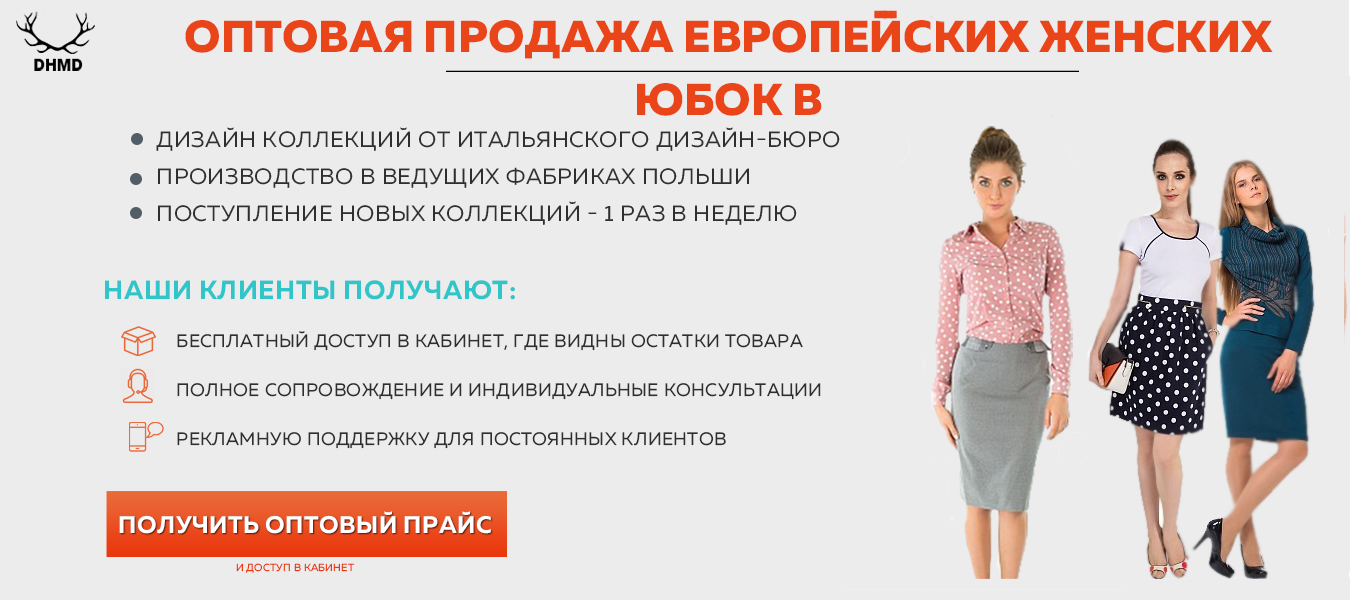
<style>
.page{position:relative;width:1350px;height:600px;background:#ececec}
.page>*{position:absolute;margin:0}
.t1{font:44.8px/62.9px "MullerExtraBoldDEMO";color:#ea4519;text-transform:uppercase}
.t2{font:22.2px/37.2px "MullerRegular";letter-spacing:0.02em;color:#2f2f2f;text-transform:uppercase}
.t3{font:26.3px "MullerBold";letter-spacing:0.02em;color:#30c5c9;text-transform:uppercase}
.t4{font:18px/49.2px "MullerRegular";letter-spacing:0.02em;color:#2f2f2f;text-transform:uppercase}
.t5{font:24px "MullerBold";letter-spacing:0.02em;color:#ffffff;text-transform:uppercase}
.t6{font:10.2px "MullerRegular";letter-spacing:0.02em;color:#ea390e;text-transform:uppercase}
</style>
<div class="page">
<p class="t1" style="left:185px;top:10px;width:1088px;height:106px;text-align:center">Оптовая продажа европейских женских юбок в</p>
<p class="t2" style="left:156px;top:127px;width:684px;height:98px">Дизайн коллекций от Итальянского Дизайн-Бюро<br>Производство в ведущих фабриках Польши<br>Поступление новых коллекций - 1 раз в неделю</p>
<p class="t3" style="left:105px;top:280px;width:410px;height:20px">Наши клиенты получают:</p>
<p class="t4" style="left:177px;top:331px;width:644px;height:118px">Бесплатный доступ в кабинет, где видны остатки товара<br>Полное сопровождение и индивидуальные консультации<br>Рекламную поддержку для постоянных клиентов</p>
<p class="t5" style="left:119px;top:511px;width:372px;height:23px">Получить Оптовый Прайс</p>
<p class="t6" style="left:236px;top:563px;width:119px;height:10px">и доступ в кабинет</p>
</div>
